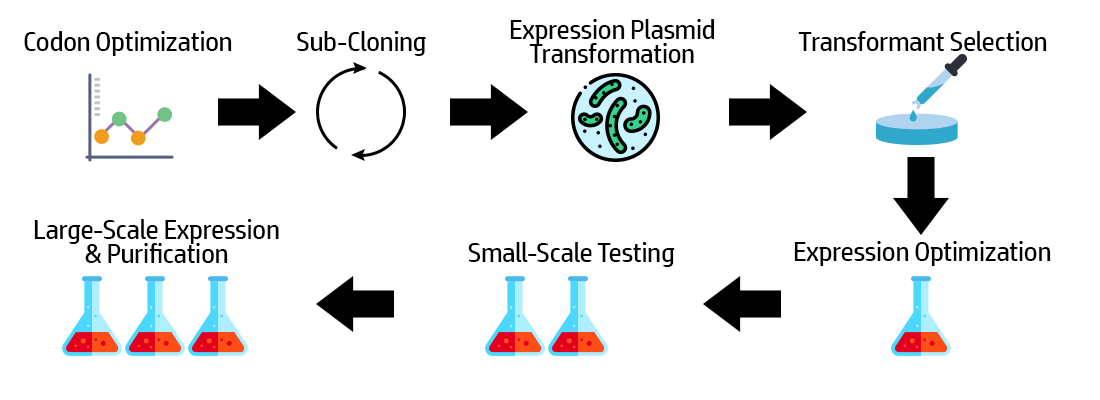
<style>
.page{position:relative;width:1100px;height:400px;background:#ffffff}
.page>*{position:absolute;margin:0}
.t1{font:27.1px/24px "HPSimplified-Regular";letter-spacing:-0.02em;color:#000000}
.t2{font:27.1px "HPSimplified-Regular";letter-spacing:-0.02em;color:#000000}
</style>
<div class="page">
<p class="t1" style="left:510px;top:19px;width:204px;height:44px;text-align:center">Expression Plasmid<br>Transformation</p>
<p class="t2" style="left:24px;top:31px;width:208px;height:25px">Codon Optimization</p>
<p class="t2" style="left:297px;top:31px;width:129px;height:25px">Sub-Cloning</p>
<p class="t2" style="left:798px;top:31px;width:249px;height:20px">Transformant Selection</p>
<p class="t1" style="left:34px;top:219px;width:245px;height:44px;text-align:center">Large-Scale Expression<br>&amp; Purification</p>
<p class="t2" style="left:468px;top:242px;width:207px;height:25px">Small-Scale Testing</p>
<p class="t2" style="left:794px;top:241px;width:257px;height:25px">Expression Optimization</p>
</div>
